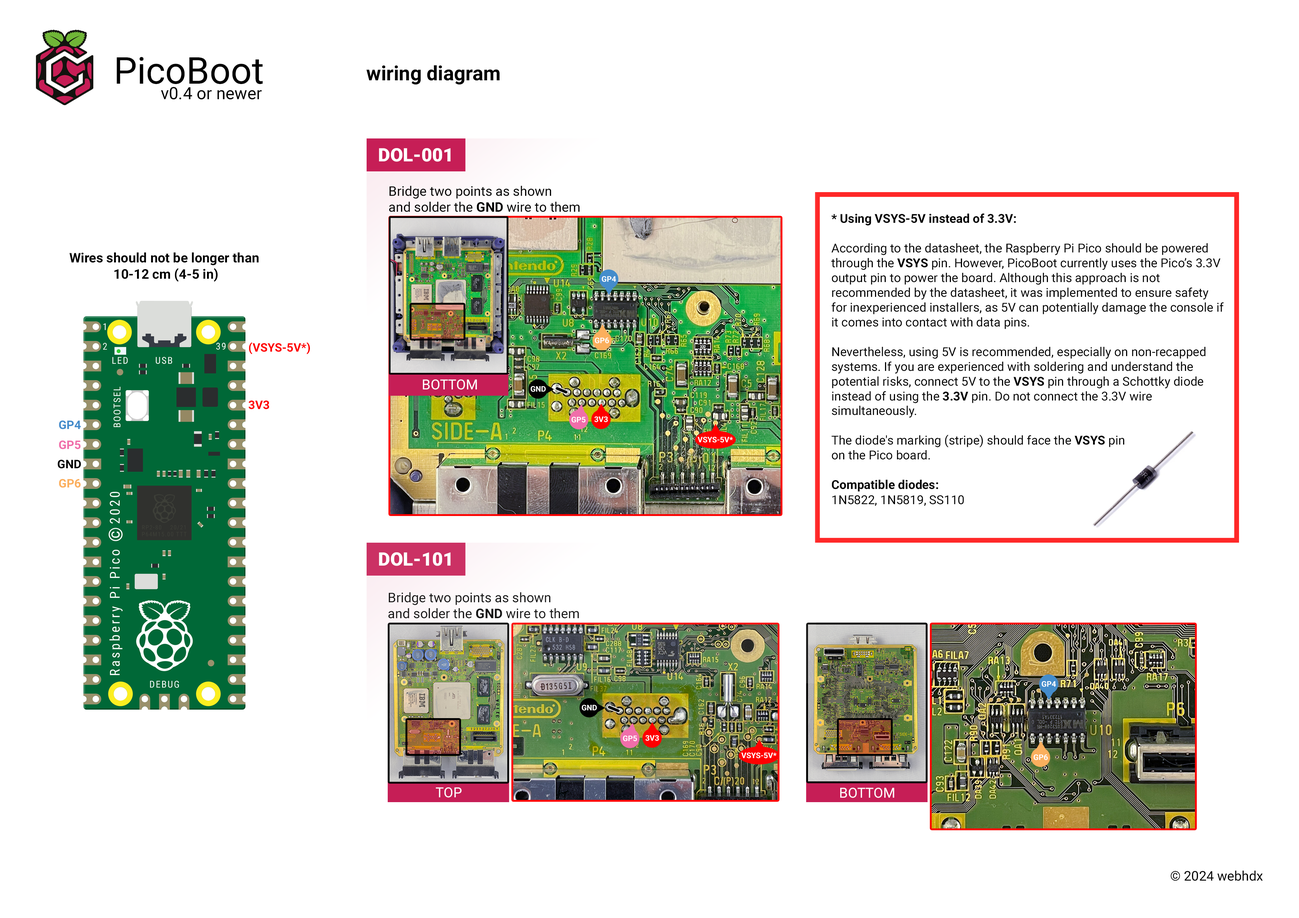
<style>
.page{position:relative;width:1299px;height:918px;background:#ffffff}
.page>*{position:absolute;margin:0}
.t1{font:37px "Roboto-Regular";color:#000000}
.t2{font:20.1px "Roboto-Bold";color:#000000}
.t3{font:17px "Roboto-Regular";color:#000000}
.t4{font:18.5px "Roboto-Black";color:#ffffff}
.t5{font:13.3px "Roboto-Regular";color:#000000}
.t6{font:13.3px "Roboto-Bold";color:#000000}
.t7{font:12.3px "Roboto-Regular";color:#000000}
.t8{font:12.3px "Roboto-Bold";color:#000000}
.t9{font:7.7px "Roboto-Bold";color:#ffffff}
.t10{font:11.8px "Roboto-Bold";color:#ff0000}
.t11{font:13.9px "Roboto-Regular";color:#ffffff}
.t12{font:11.8px "Roboto-Bold";color:#448ccb}
.t13{font:11.8px "Roboto-Bold";color:#f06eaa}
.t14{font:11.8px "Roboto-Bold";color:#000000}
.t15{font:11.8px "Roboto-Bold";color:#fbaf5d}
</style>
<div class="page">
<p class="t1" style="left:117px;top:57px;width:146px;height:27px">PicoBoot</p>
<p class="t2" style="left:366px;top:65px;width:133px;height:20px">wiring diagram</p>
<p class="t3" style="left:161px;top:87px;width:101px;height:13px">v0.4 or newer</p>
<p class="t4" style="left:379px;top:148px;width:72px;height:14px">DOL-001</p>
<p class="t5" style="left:389px;top:186px;width:190px;height:26px">Bridge two points as shown <br>and solder the <span class="t6">GND </span>wire to them</p>
<p class="t7" style="left:831px;top:213px;width:393px;height:293px"><span class="t8">* Using VSYS-5V instead of 3.3V:<br></span><br>According to the datasheet, the Raspberry Pi Pico should be powered through the <span class="t8">VSYS </span>pin. However, PicoBoot currently uses the Pico’s 3.3V output pin to power the board. Although this approach is not recommended by the datasheet, it was implemented to ensure safety for inexperienced installers, as 5V can potentially damage the console if it comes into contact with data pins.<br><br>Nevertheless, using 5V is recommended, especially on non-recapped systems. If you are experienced with soldering and understand the potential risks, connect 5V to the <span class="t8">VSYS </span>pin through a Schottky diode instead of using the <span class="t8">3.3V </span>pin. Do not connect the 3.3V wire simultaneously.<br><br>The diode's marking (stripe) should face the <span class="t8">VSYS </span>pin <br>on the Pico board.<br><br><span class="t8">Compatible diodes: <br></span>1N5822, 1N5819, SS110</p>
<p class="t6" style="left:69px;top:252px;width:190px;height:30px;text-align:center">Wires should not be longer than <br>10-12 cm (4-5 in)</p>
<p class="t9" style="left:602px;top:276px;width:14px;height:6px">GP4</p>
<p class="t9" style="left:595px;top:338px;width:14px;height:6px">GP6</p>
<p class="t10" style="left:249px;top:342px;width:61px;height:12px">(VSYS-5V*)</p>
<p class="t11" style="left:423px;top:379px;width:54px;height:11px">BOTTOM</p>
<p class="t9" style="left:531px;top:386px;width:15px;height:6px">GND</p>
<p class="t10" style="left:248px;top:401px;width:21px;height:8px">3V3</p>
<p class="t12" style="left:59px;top:421px;width:22px;height:8px">GP4</p>
<p class="t9" style="left:571px;top:417px;width:14px;height:6px">GP5</p>
<p class="t9" style="left:594px;top:416px;width:14px;height:6px">3V3</p>
<p class="t9" style="left:697px;top:437px;width:36px;height:6px">VSYS-5V*</p>
<p class="t13" style="left:59px;top:441px;width:22px;height:8px">GP5</p>
<p class="t14" style="left:58px;top:460px;width:23px;height:9px">GND</p>
<p class="t15" style="left:59px;top:479px;width:22px;height:9px">GP6</p>
<p class="t4" style="left:379px;top:552px;width:72px;height:14px">DOL-101</p>
<p class="t5" style="left:388px;top:592px;width:191px;height:27px">Bridge two points as shown <br>and solder the <span class="t6">GND </span>wire to them</p>
<p class="t9" style="left:1041px;top:681px;width:15px;height:6px">GP4</p>
<p class="t9" style="left:582px;top:705px;width:15px;height:6px">GND</p>
<p class="t9" style="left:623px;top:736px;width:14px;height:6px">GP5</p>
<p class="t9" style="left:645px;top:735px;width:14px;height:6px">3V3</p>
<p class="t9" style="left:741px;top:753px;width:35px;height:6px">VSYS-5V*</p>
<p class="t9" style="left:1033px;top:755px;width:15px;height:5px">GP6</p>
<p class="t11" style="left:436px;top:787px;width:26px;height:11px">TOP</p>
<p class="t11" style="left:840px;top:788px;width:54px;height:10px">BOTTOM</p>
<p class="t5" style="left:1170px;top:871px;width:92px;height:10px">© 2024 webhdx</p>
</div>
